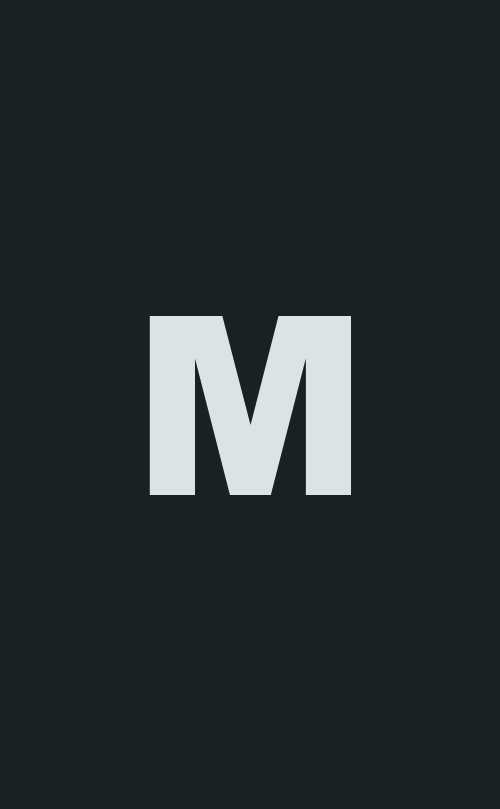
<style>
.page{position:relative;width:500px;height:809px;background:#1b2021}
.page>*{position:absolute;margin:0}
.t1{font:250px "Arial-Black";letter-spacing:0.075em;color:#dce4e3}
</style>
<div class="page">
<p class="t1" style="left:149px;top:316px;width:202px;height:179px">M</p>
</div>
